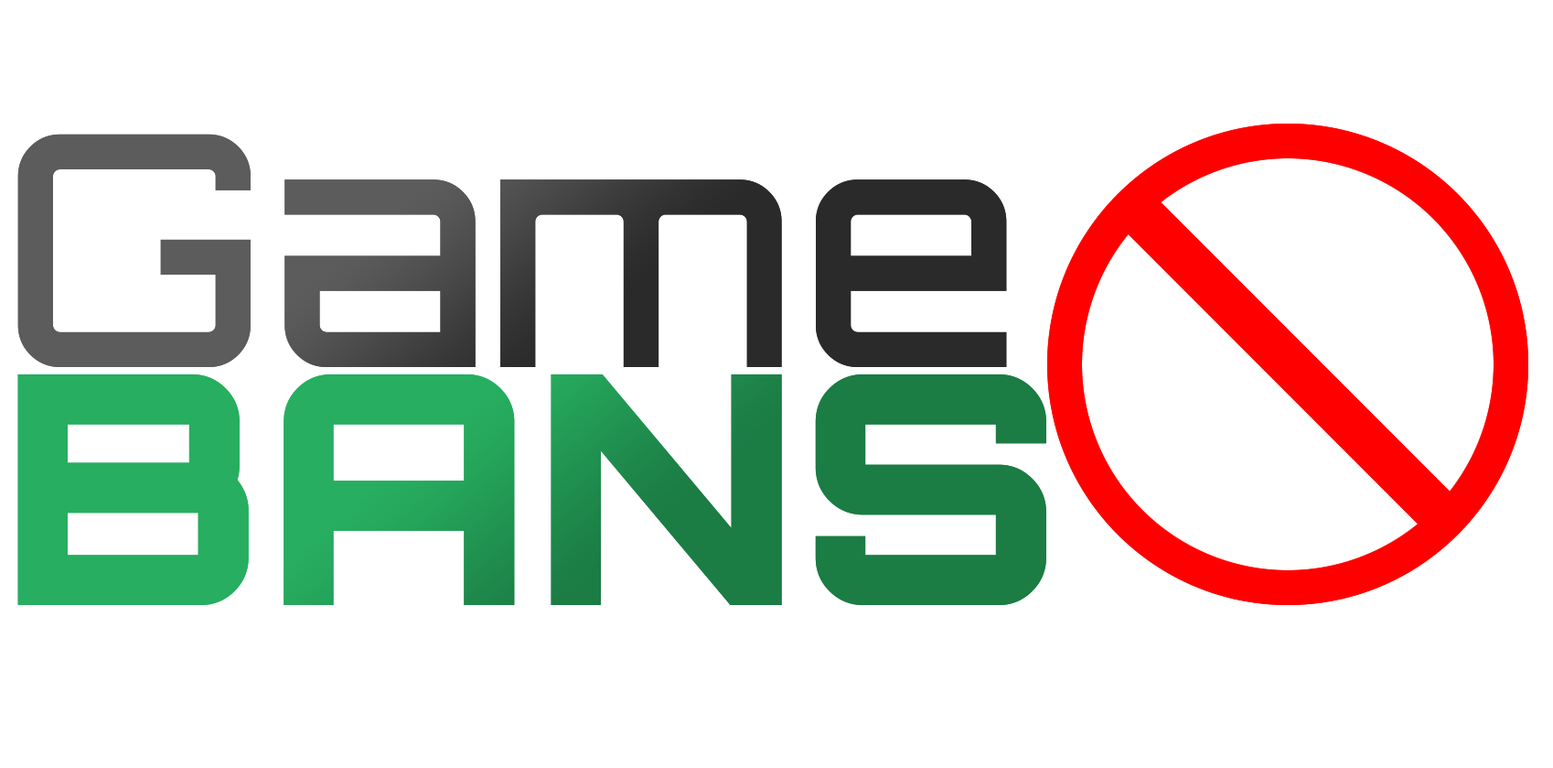
<style>
.page{position:relative;width:1553px;height:768px;background:#ffffff}
.page>*{position:absolute;margin:0}
.t1{font:323px "Orbitron-Medium"}
.t2{font:320.2px "Orbitron-Black"}
</style>
<div class="page">
<p class="t1" style="left:17px;top:134px;width:990px;height:233px">Game<span class="t2"></span></p>
<p class="t2" style="left:17px;top:374px;width:1030px;height:231px">BANS</p>
</div>
